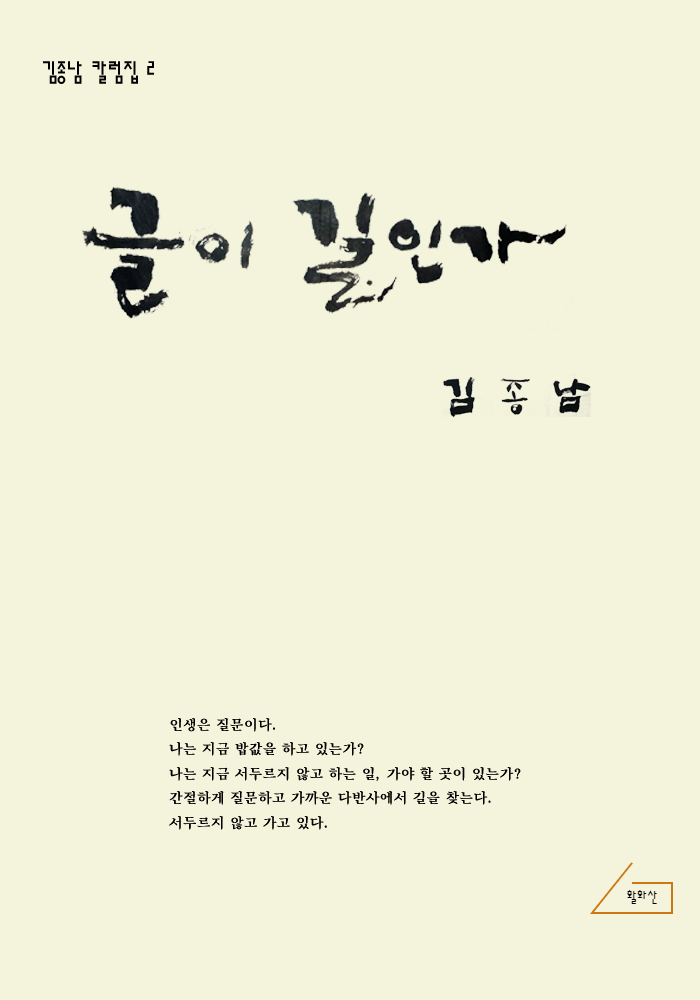
<style>
.page{position:relative;width:700px;height:1000px;background:#f4f4dc}
.page>*{position:absolute;margin:0}
.t1{font:24px "H2sa1M";color:#000000}
.t2{font:14px "SunBatang-Bold";color:#000000}
</style>
<div class="page">
<p class="t1" style="left:43px;top:61px;width:111px;height:23px">김종남 칼럼집 2</p>
<p class="t2" style="left:169px;top:718px;width:352px;height:112px">인생은 질문이다.<br>나는 지금 밥값을 하고 있는가?<br>나는 지금 서두르지 않고 하는 일, 가야 할 곳이 있는가?<br>간절하게 질문하고 가까운 다반사에서 길을 찾는다.<br>서두르지 않고 가고 있다.</p>
</div>
